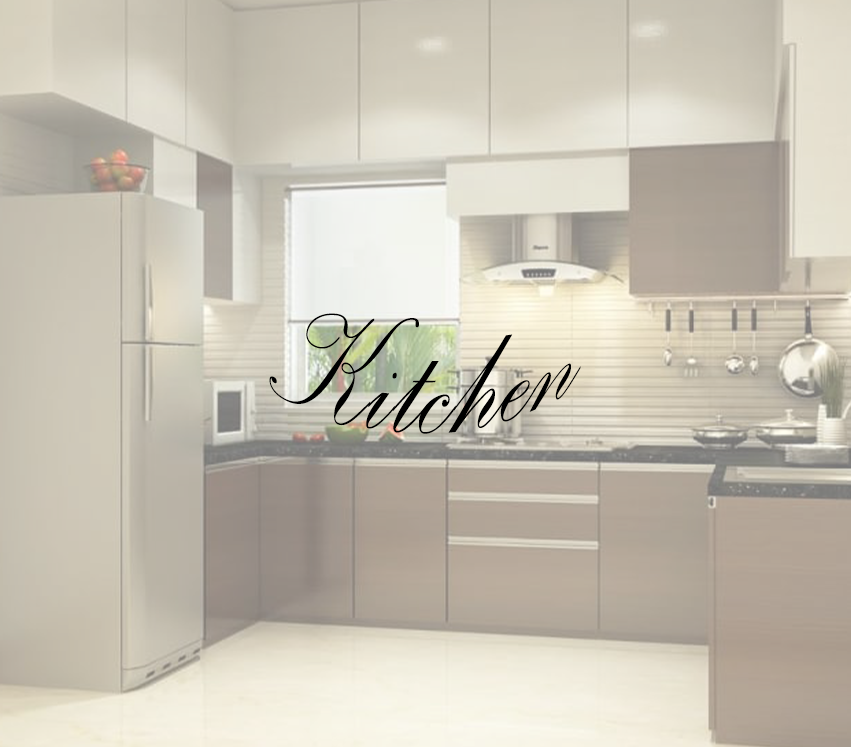
<style>
.page{position:relative;width:851px;height:747px}
.page>*{position:absolute;margin:0}
.t1{font:150px "PalaceScriptMT";color:#000000}
</style>
<div class="page">
<p class="t1" style="left:269px;top:313px;width:312px;height:121px">Kitchen</p>
</div>
